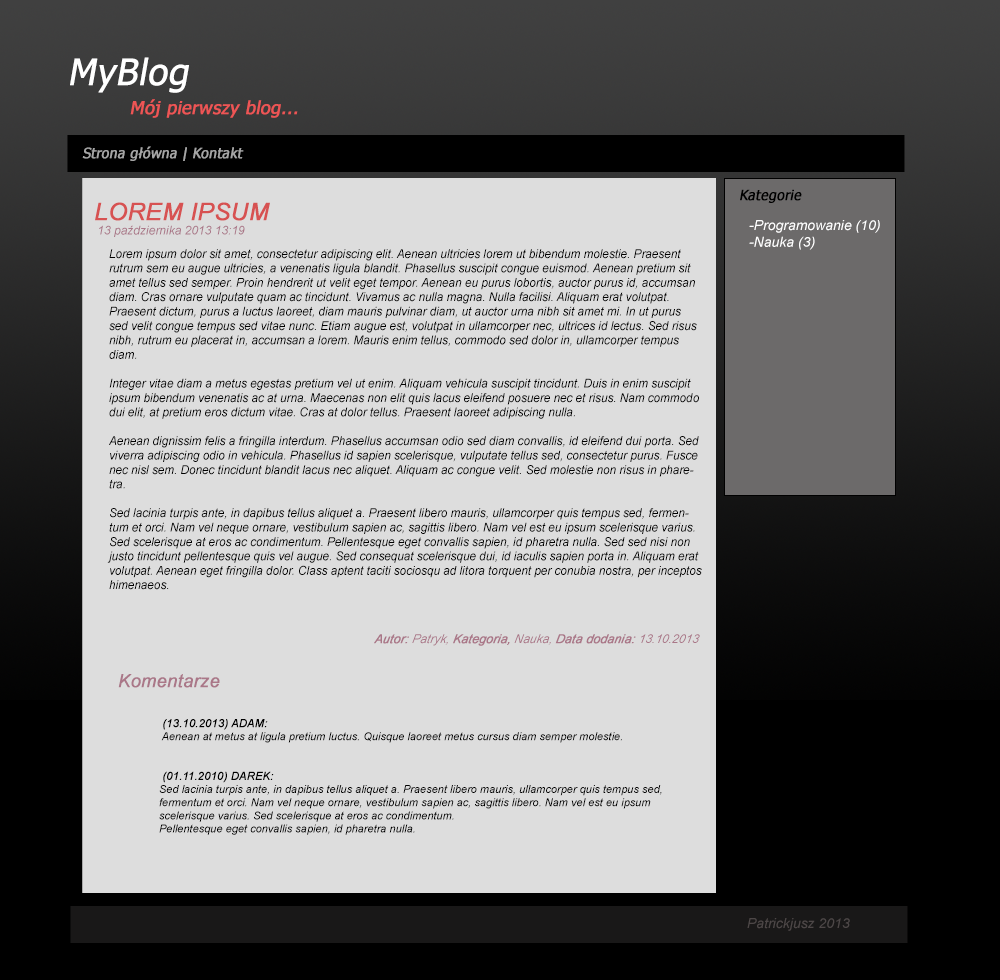
<style>
.page{position:relative;width:1000px;height:980px;background:#dddddd}
.page>*{position:absolute;margin:0}
.t1{font:36px "Tahoma";color:#ffffff;font-weight:bold;font-style:italic}
.t2{font:18px "Tahoma";color:#ee5555;font-weight:bold;font-style:italic}
.t3{font:14px "Tahoma";color:#a5a5a5;font-weight:bold;font-style:italic}
.t4{font:14px "Tahoma";color:#000000;font-weight:bold;font-style:italic}
.t5{font:12px "Arial-ItalicMT";color:#aa7788}
.t6{font:24px "Arial-ItalicMT";color:#d75252;font-weight:bold}
.t7{font:14px "Arial-ItalicMT";color:#ffffff}
.t8{font:12px "Arial-ItalicMT";color:#000000}
.t9{font:12px "Arial-ItalicMT";color:#aa7788;font-weight:bold;font-style:italic}
.t10{font:12px "Arial-ItalicMT";color:#aa7788;font-style:italic}
.t11{font:18px "Arial-ItalicMT";color:#aa7788;font-weight:bold}
.t12{font:11px "Arial-ItalicMT";color:#000000}
.t13{font:11px "Arial-ItalicMT";color:#000000;font-weight:bold}
.t14{font:14px "Arial-ItalicMT";color:#4d4747}
</style>
<div class="page">
<p class="t1" style="left:70px;top:57px;width:119px;height:36px">MyBlog</p>
<p class="t2" style="left:130px;top:99px;width:168px;height:19px">Mój pierwszy blog...</p>
<p class="t3" style="left:82px;top:146px;width:162px;height:15px">Strona główna | Kontakt</p>
<p class="t4" style="left:740px;top:189px;width:62px;height:14px">Kategorie</p>
<p class="t5" style="left:95px;top:202px;width:175px;height:35px"><span class="t6">LOREM IPSUM<br></span> 13 października 2013 13:19</p>
<p class="t7" style="left:749px;top:220px;width:131px;height:30px">-Programowanie (10)<br>-Nauka (3)</p>
<p class="t8" style="left:107px;top:249px;width:595px;height:341px">Lorem ipsum dolor sit amet, consectetur adipiscing elit. Aenean ultricies lorem ut bibendum molestie. Praesent rutrum sem eu augue ultricies, a venenatis ligula blandit. Phasellus suscipit congue euismod. Aenean pretium sit amet tellus sed semper. Proin hendrerit ut velit eget tempor. Aenean eu purus lobortis, auctor purus id, accumsan diam. Cras ornare vulputate quam ac tincidunt. Vivamus ac nulla magna. Nulla facilisi. Aliquam erat volutpat. Praesent dictum, purus a luctus laoreet, diam mauris pulvinar diam, ut auctor urna nibh sit amet mi. In ut purus sed velit congue tempus sed vitae nunc. Etiam augue est, volutpat in ullamcorper nec, ultrices id lectus. Sed risus nibh, rutrum eu placerat in, accumsan a lorem. Mauris enim tellus, commodo sed dolor in, ullamcorper tempus diam.<br><br>Integer vitae diam a metus egestas pretium vel ut enim. Aliquam vehicula suscipit tincidunt. Duis in enim suscipit ipsum bibendum venenatis ac at urna. Maecenas non elit quis lacus eleifend posuere nec et risus. Nam commodo dui elit, at pretium eros dictum vitae. Cras at dolor tellus. Praesent laoreet adipiscing nulla.<br><br>Aenean dignissim felis a fringilla interdum. Phasellus accumsan odio sed diam convallis, id eleifend dui porta. Sed viverra adipiscing odio in vehicula. Phasellus id sapien scelerisque, vulputate tellus sed, consectetur purus. Fusce nec nisl sem. Donec tincidunt blandit lacus nec aliquet. Aliquam ac congue velit. Sed molestie non risus in pharetra.<br><br>Sed lacinia turpis ante, in dapibus tellus aliquet a. Praesent libero mauris, ullamcorper quis tempus sed, fermentum et orci. Nam vel neque ornare, vestibulum sapien ac, sagittis libero. Nam vel est eu ipsum scelerisque varius. Sed scelerisque at eros ac condimentum. Pellentesque eget convallis sapien, id pharetra nulla. Sed sed nisi non justo tincidunt pellentesque quis vel augue. Sed consequat scelerisque dui, id iaculis sapien porta in. Aliquam erat volutpat. Aenean eget fringilla dolor. Class aptent taciti sociosqu ad litora torquent per conubia nostra, per inceptos himenaeos.</p>
<p class="t9" style="left:374px;top:634px;width:326px;height:12px">Autor: <span class="t10">Patryk, </span>Kategoria,<span class="t10"> Nauka, </span>Data dodania: <span class="t10">13.10.2013</span></p>
<p class="t11" style="left:118px;top:674px;width:102px;height:14px">Komentarze</p>
<p class="t12" style="left:159px;top:719px;width:503px;height:116px"><span class="t13"> (13.10.2013) ADAM:<br></span> Aenean at metus at ligula pretium luctus. Quisque laoreet metus cursus diam semper molestie.<br><br><br><span class="t13"> (01.11.2010) DAREK:<br></span>Sed lacinia turpis ante, in dapibus tellus aliquet a. Praesent libero mauris, ullamcorper quis tempus sed,<br>fermentum et orci. Nam vel neque ornare, vestibulum sapien ac, sagittis libero. Nam vel est eu ipsum<br>scelerisque varius. Sed scelerisque at eros ac condimentum. <br>Pellentesque eget convallis sapien, id pharetra nulla.</p>
<p class="t14" style="left:747px;top:918px;width:103px;height:13px">Patrickjusz 2013</p>
</div>
